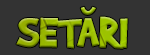
<style>
.page{position:relative;width:150px;height:55px;background:#333333}
.page>*{position:absolute;margin:0}
.t1{font:50px "Brady-Bunch"}
</style>
<div class="page">
<p class="t1" style="left:16px;top:16px;width:112px;height:33px">SETARI</p>
</div>
